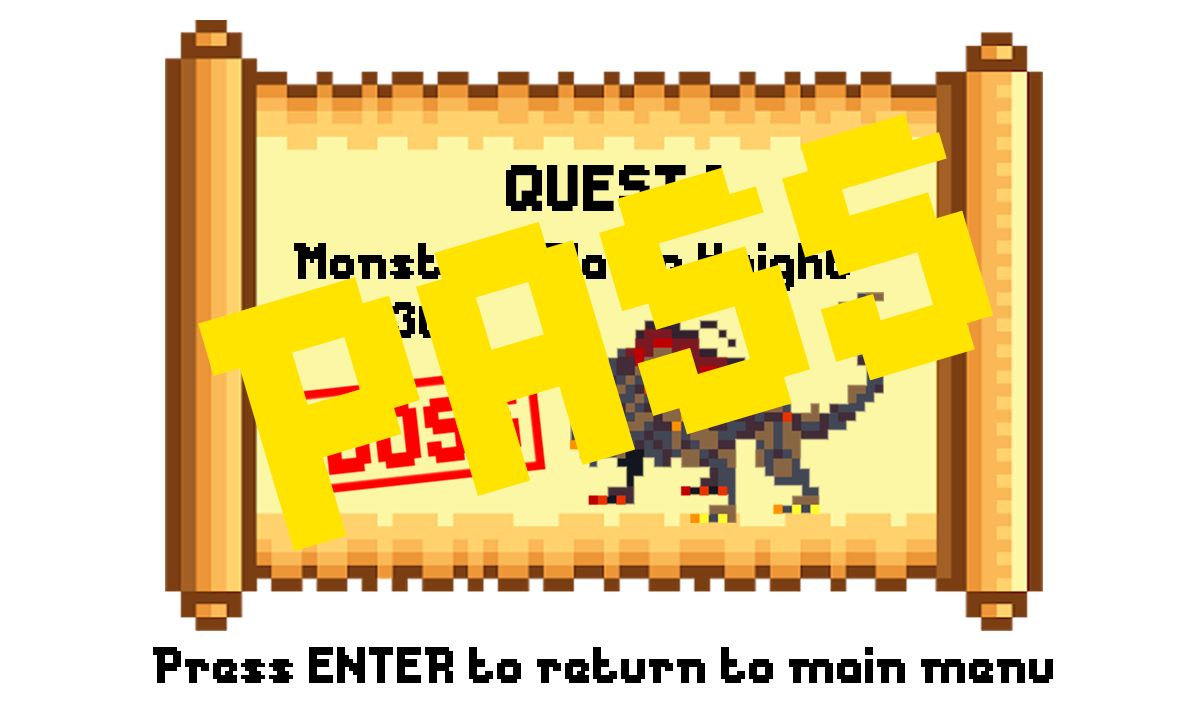
<style>
.page{position:relative;width:1200px;height:720px;background:#ffffff}
.page>*{position:absolute;margin:0}
.t1{font:327.3px "Messe-Duesseldorf";color:#ffe400}
.t2{font:61.3px "Messe-Duesseldorf";color:#000000}
.t3{font:48px "Messe-Duesseldorf"}
.t4{font:48px "Messe-Duesseldorf";color:#ffe400}
.t5{font:48px "Messe-Duesseldorf";color:#000000}
</style>
<div class="page">
<p class="t1" style="left:198px;top:113px;width:796px;height:439px;rotate:-17deg">PASS</p>
<p class="t2" style="left:506px;top:165px;width:216px;height:46px">QUEST 1</p>
<p class="t3" style="left:294px;top:243px;width:556px;height:48px">Monster : Flame Knight</p>
<p class="t4" style="left:295px;top:302px;width:148px;height:36px">HP : 30</p>
<p class="t5" style="left:153px;top:647px;width:900px;height:36px">Press ENTER to return to main menu</p>
</div>
